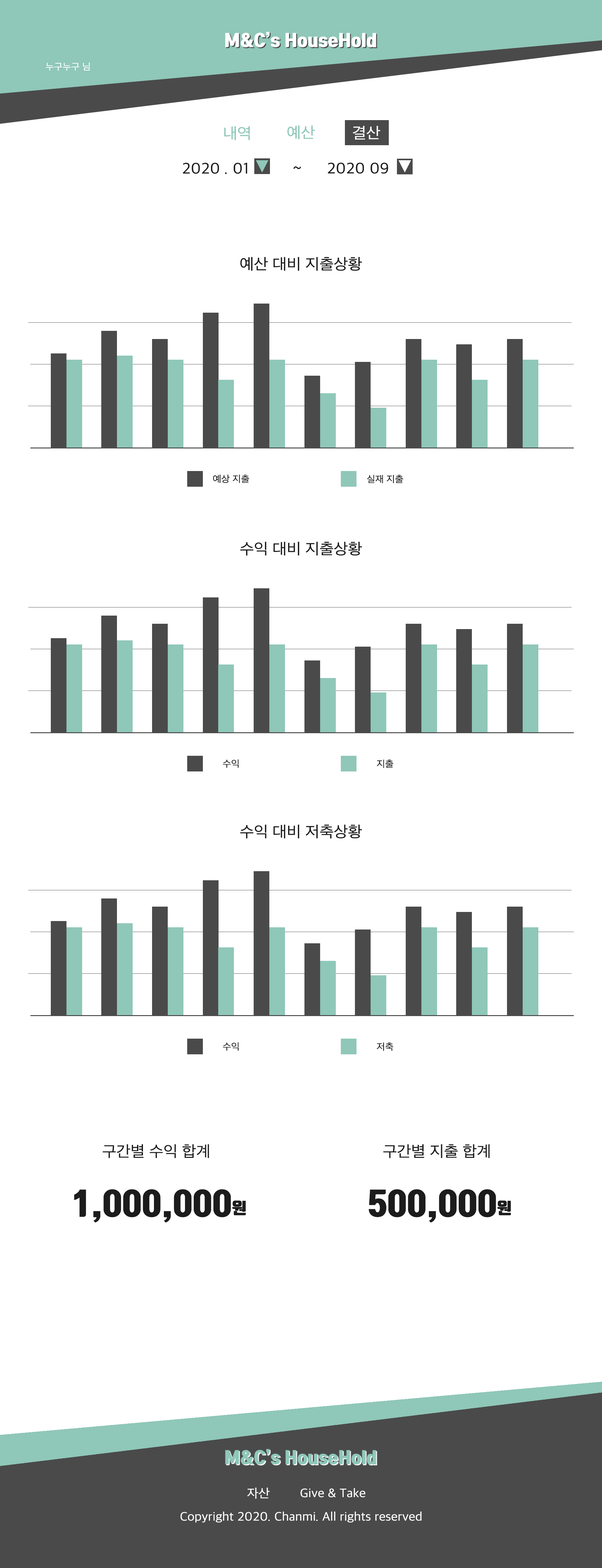
<style>
.page{position:relative;width:602px;height:1568px;background:#ffffff}
.page>*{position:absolute;margin:0}
.t1{font:9.4px "AppleSDGothicNeo-Regular";color:#ffffff;scale:1.05 1}
.t2{font:15.7px "AppleSDGothicNeo-Regular";color:#8fc7b8;scale:1.05 1}
.t3{font:15.7px "AppleSDGothicNeo-Regular";color:#ffffff;scale:1.05 1}
.t4{font:15.7px "AppleSDGothicNeo-Regular";color:#1c1c1c;scale:1.05 1}
.t5{font:9.4px "AppleSDGothicNeo-Regular";color:#1c1c1c;scale:1.05 1}
.t6{font:31.4px "TmonMonsoriOTFBlack";color:#1c1c1c;scale:1.05 1}
.t7{font:15.7px "TmonMonsoriOTFBlack";color:#1c1c1c;scale:1.05 1}
.t8{font:12.5px "AppleSDGothicNeo-Regular";color:#ffffff;scale:1.05 1}
</style>
<div class="page">
<p class="t1" style="left:46px;top:62px;width:44px;height:9px">누구누구 님</p>
<p class="t2" style="left:287px;top:125px;width:28px;height:15px">예산</p>
<p class="t3" style="left:353px;top:126px;width:27px;height:14px">결산</p>
<p class="t2" style="left:224px;top:126px;width:26px;height:14px">내역</p>
<p class="t4" style="left:183px;top:163px;width:64px;height:11px">2020 . 01</p>
<p class="t4" style="left:294px;top:166px;width:7px;height:3px">~</p>
<p class="t4" style="left:328px;top:162px;width:60px;height:12px">2020 09</p>
<p class="t4" style="left:240px;top:257px;width:122px;height:14px">예산 대비 지출상황</p>
<p class="t5" style="left:213px;top:474px;width:36px;height:9px">예상 지출</p>
<p class="t5" style="left:367px;top:475px;width:36px;height:8px">실재 지출</p>
<p class="t4" style="left:240px;top:542px;width:122px;height:14px">수익 대비 지출상황</p>
<p class="t5" style="left:223px;top:759px;width:16px;height:9px">수익</p>
<p class="t5" style="left:377px;top:760px;width:17px;height:8px">지출</p>
<p class="t4" style="left:240px;top:824px;width:122px;height:15px">수익 대비 저축상황</p>
<p class="t5" style="left:223px;top:1042px;width:16px;height:9px">수익</p>
<p class="t5" style="left:377px;top:1042px;width:17px;height:9px">저축</p>
<p class="t4" style="left:103px;top:1144px;width:106px;height:14px">구간별 수익 합계</p>
<p class="t4" style="left:383px;top:1144px;width:107px;height:14px">구간별 지출 합계</p>
<p class="t6" style="left:74px;top:1189px;width:172px;height:34px">1,000,000<span class="t7">원</span></p>
<p class="t6" style="left:369px;top:1189px;width:142px;height:34px">500,000<span class="t7">원</span></p>
<p class="t8" style="left:247px;top:1487px;width:23px;height:12px">자산</p>
<p class="t8" style="left:300px;top:1488px;width:65px;height:9px">Give &amp; Take</p>
<p class="t8" style="left:180px;top:1512px;width:242px;height:11px">Copyright 2020. Chanmi. All rights reserved</p>
</div>
